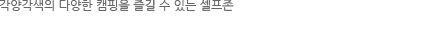
<style>
.page{position:relative;width:425px;height:29px;background:#ffffff}
.page>*{position:absolute;margin:0}
.t1{font:12px "NanumGothic";color:#666666}
</style>
<div class="page">
<p class="t1" style="left:0px;top:0px;width:234px;height:11px">각양각색의 다양한 캠핑을 즐길 수 있는 셀프존</p>
</div>
